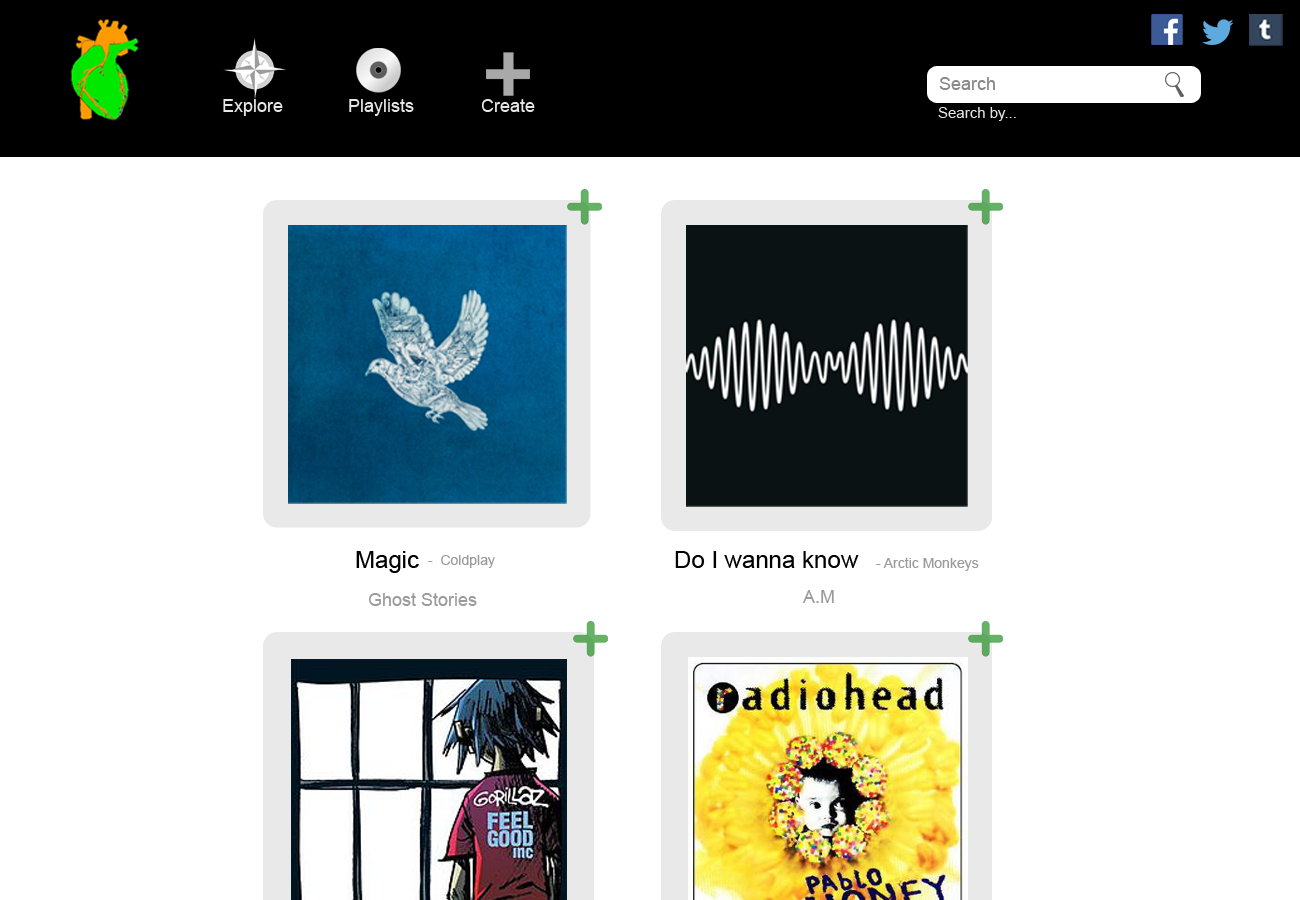
<style>
.page{position:relative;width:1300px;height:900px;background:#ffffff}
.page>*{position:absolute;margin:0}
.t1{font:18px "ArialMT";color:#898989}
.t2{font:18px "ArialMT";color:#e7e5e5}
.t3{font:15px "ArialMT";color:#e7e5e5}
.t4{font:24px "ArialMT";color:#010101}
.t5{font:14px "ArialMT";color:#9c9b9b}
.t6{font:18px "ArialMT";color:#9c9b9b}
.t7{font:18px "ArialMT";color:#9c9b9a}
</style>
<div class="page">
<p class="t1" style="left:939px;top:77px;width:56px;height:13px">Search</p>
<p class="t2" style="left:223px;top:99px;width:60px;height:17px">Explore</p>
<p class="t2" style="left:349px;top:99px;width:65px;height:17px">Playlists</p>
<p class="t2" style="left:481px;top:99px;width:54px;height:13px">Create</p>
<p class="t3" style="left:938px;top:107px;width:78px;height:14px">Search by...</p>
<p class="t4" style="left:356px;top:551px;width:63px;height:22px">Magic</p>
<p class="t5" style="left:428px;top:555px;width:67px;height:13px">-  Coldplay</p>
<p class="t4" style="left:675px;top:551px;width:184px;height:17px">Do I wanna know</p>
<p class="t5" style="left:876px;top:557px;width:103px;height:14px">- Arctic Monkeys</p>
<p class="t6" style="left:368px;top:593px;width:109px;height:13px">Ghost Stories</p>
<p class="t7" style="left:802px;top:590px;width:32px;height:13px">A.M</p>
</div>
